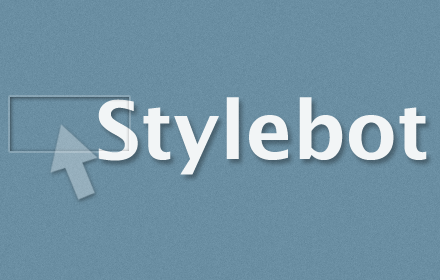
<style>
.page{position:relative;width:440px;height:280px}
.page>*{position:absolute;margin:0}
.t1{font:80px "LucidaGrande-Bold";color:#f2f5f6}
</style>
<div class="page">
<p class="t1" style="left:98px;top:97px;width:329px;height:78px">Stylebot</p>
</div>
